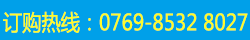
<style>
.page{position:relative;width:250px;height:40px;background:#00a0e9}
.page>*{position:absolute;margin:0}
.t1{font:22.1px "MicrosoftYaHei";color:#fffc29;text-transform:uppercase;scale:0.87 1}
</style>
<div class="page">
<p class="t1" style="left:3px;top:11px;width:245px;height:23px">订购热线：0769-8532 8027</p>
</div>
